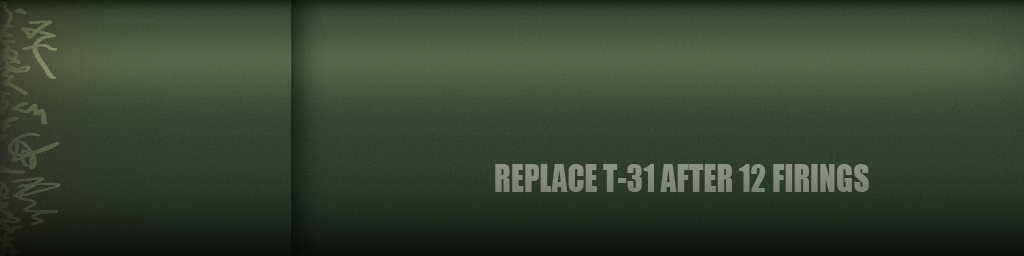
<style>
.page{position:relative;width:1024px;height:256px}
.page>*{position:absolute;margin:0}
.t1{font:35.1px "Impact";color:#868b7e;scale:0.89 1}
</style>
<div class="page">
<p class="t1" style="left:495px;top:164px;width:374px;height:28px">REPLACE T-31 AFTER 12 FIRINGS</p>
</div>
